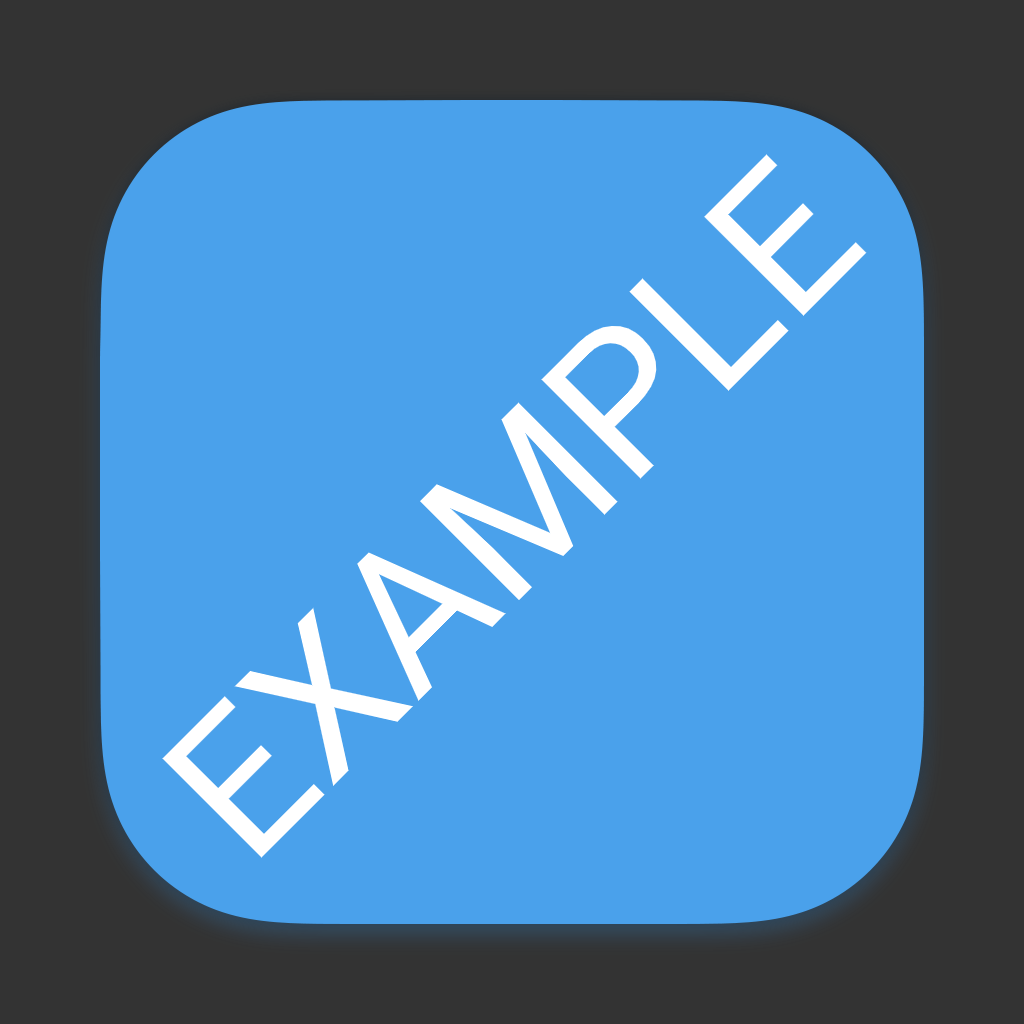
<style>
.page{position:relative;width:1024px;height:1024px;background:#4aa1eb}
.page>*{position:absolute;margin:0}
.t1{font:197px "Roboto-Regular";color:#ffffff}
</style>
<div class="page">
<p class="t1" style="left:162px;top:154px;width:705px;height:704px;rotate:-45deg">EXAMPLE</p>
</div>
